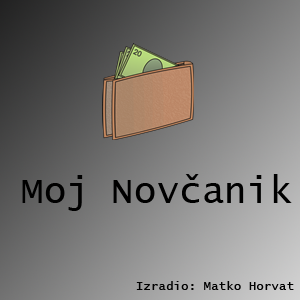
<style>
.page{position:relative;width:300px;height:300px}
.page>*{position:absolute;margin:0}
.t1{font:37.5px "LucidaConsole";color:#000000}
.t2{font:12.5px "LucidaConsole";color:#000000}
</style>
<div class="page">
<p class="t1" style="left:22px;top:174px;width:270px;height:37px">Moj Novčanik</p>
<p class="t2" style="left:136px;top:281px;width:158px;height:9px">Izradio: Matko Horvat</p>
</div>
